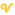
<style>
.page{position:relative;width:15px;height:15px;background:#ffffff}
.page>*{position:absolute;margin:0}
.t1{font:14px "HarlowSolid";color:#ffc73a}
</style>
<div class="page">
<p class="t1" style="left:0px;top:3px;width:14px;height:10px">V</p>
</div>
